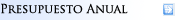
<style>
.page{position:relative;width:177px;height:20px}
.page>*{position:absolute;margin:0}
.t1{font:12px "TrajanPro-Regular";color:#050505}
</style>
<div class="page">
<p class="t1" style="left:1px;top:3px;width:127px;height:11px">Presupuesto Anual</p>
</div>
